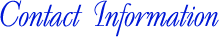
<style>
.page{position:relative;width:219px;height:37px;background:#ffffff}
.page>*{position:absolute;margin:0}
.t1{font:36px "UkrainianDecor";color:#0019d7}
</style>
<div class="page">
<p class="t1" style="left:0px;top:0px;width:219px;height:37px">Contact Information</p>
</div>
